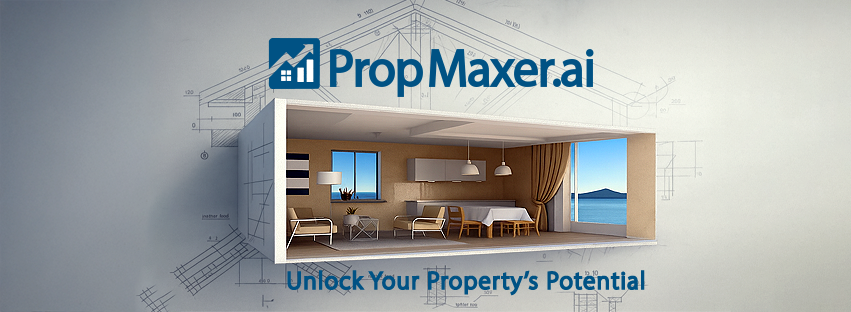
<style>
.page{position:relative;width:851px;height:312px}
.page>*{position:absolute;margin:0}
.t1{font:52.2px "MyriadPro-Regular";letter-spacing:-0.018em;color:#005284}
.t2{font:24.2px "MyriadPro-Light";letter-spacing:0.07em;color:#005284}
</style>
<div class="page">
<p class="t1" style="left:330px;top:49px;width:264px;height:48px">Prop Maxer.ai</p>
<p class="t2" style="left:287px;top:270px;width:358px;height:26px">Unlock Your Property’s Potential</p>
</div>
